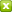
<style>
.page{position:relative;width:12px;height:12px}
.page>*{position:absolute;margin:0}
.t1{font:8.1px "Verdana-Bold";color:#ffffff;font-weight:bold;scale:1.12 1}
</style>
<div class="page">
<p class="t1" style="left:2px;top:3px;width:8px;height:6px">X</p>
</div>
